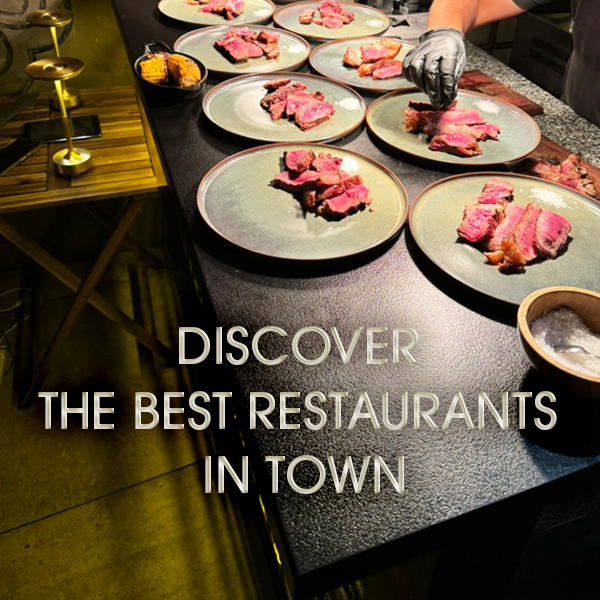
<style>
.page{position:relative;width:600px;height:600px}
.page>*{position:absolute;margin:0}
.t1{font:50px/65px "ITCAvantGardePro-Md";text-transform:uppercase}
</style>
<div class="page">
<p class="t1" style="left:38px;top:326px;width:519px;height:168px;text-align:center">Discover <br>the best restaurants <br>in town</p>
</div>
